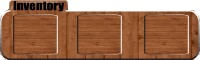
<style>
.page{position:relative;width:200px;height:60px}
.page>*{position:absolute;margin:0}
.t1{font:11.4px "Impact";color:#020202;scale:1.14 1}
</style>
<div class="page">
<p class="t1" style="left:13px;top:1px;width:51px;height:11px">Inventory</p>
</div>
